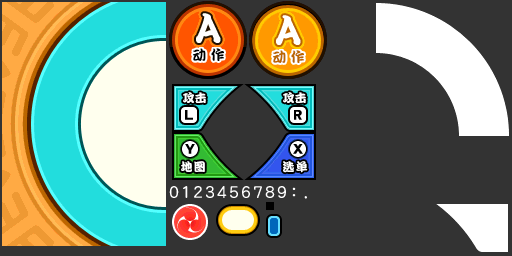
<style>
.page{position:relative;width:512px;height:256px;background:#333333}
.page>*{position:absolute;margin:0}
.t1{font:14px "DFPKanTingLiuW9";color:#000000}
.t2{font:14px "DFPKanTingLiuW9";color:#bb6600}
.t3{font:12px "DFPKanTingLiuW9";color:#ffffff}
.t4{font:12px "DFPKanTingLiuW9";letter-spacing:0.1em;color:#ffffff}
</style>
<div class="page">
<p class="t1" style="left:193px;top:48px;width:31px;height:13px">动 作</p>
<p class="t2" style="left:273px;top:50px;width:31px;height:13px">动 作</p>
<p class="t3" style="left:183px;top:92px;width:23px;height:11px">攻击</p>
<p class="t3" style="left:283px;top:92px;width:23px;height:11px">攻击</p>
<p class="t4" style="left:181px;top:161px;width:24px;height:11px">地图</p>
<p class="t4" style="left:283px;top:161px;width:25px;height:12px">选单</p>
</div>
